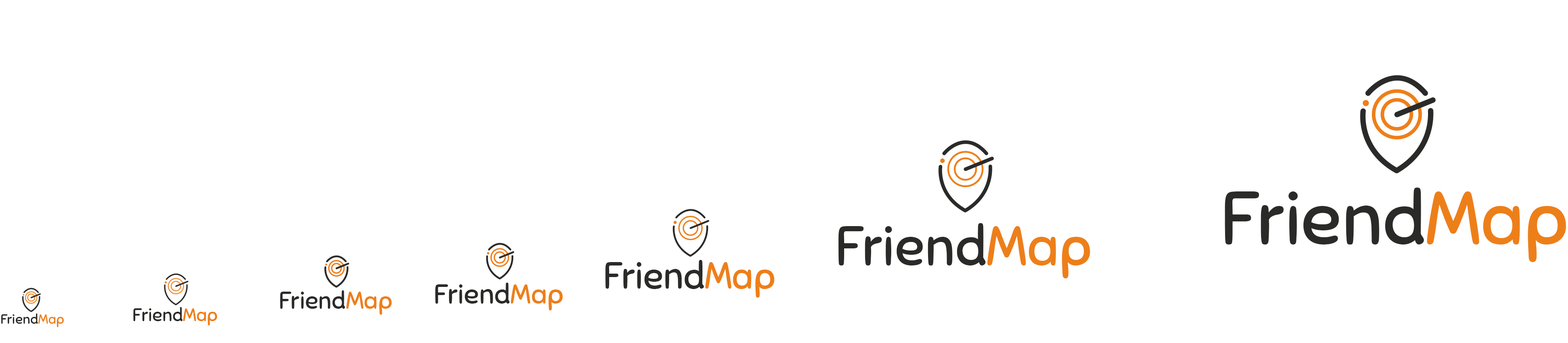
<style>
.page{position:relative;width:1568px;height:343px;background:#ffffff}
.page>*{position:absolute;margin:0}
.t1{font:74.9px "Sniglet-Regular";color:#2a2a29}
.t2{font:74.9px "Sniglet-Regular";color:#ee7f19}
.t3{font:55.3px "Sniglet-Regular";color:#2a2a29}
.t4{font:55.3px "Sniglet-Regular";color:#ee7f19}
.t5{font:37px "Sniglet-Regular";color:#2a2a29}
.t6{font:37px "Sniglet-Regular";color:#ee7f19}
.t7{font:24.6px "Sniglet-Regular";color:#2a2a29}
.t8{font:24.6px "Sniglet-Regular";color:#ee7f19}
.t9{font:28px "Sniglet-Regular";color:#2a2a29}
.t10{font:28px "Sniglet-Regular";color:#ee7f19}
.t11{font:13.8px "Sniglet-Regular";color:#2a2a29}
.t12{font:13.8px "Sniglet-Regular";color:#ee7f19}
.t13{font:18.4px "Sniglet-Regular";color:#2a2a29}
.t14{font:18.4px "Sniglet-Regular";color:#ee7f19}
</style>
<div class="page">
<p class="t1" style="left:1225px;top:187px;width:341px;height:75px">Friend<span class="t2">Map</span></p>
<p class="t3" style="left:838px;top:223px;width:252px;height:55px">Friend<span class="t4">Map</span></p>
<p class="t5" style="left:605px;top:260px;width:169px;height:38px">Friend<span class="t6">Map</span></p>
<p class="t7" style="left:280px;top:290px;width:112px;height:25px">Friend<span class="t8">Map</span></p>
<p class="t9" style="left:435px;top:283px;width:128px;height:27px">Friend<span class="t10">Map</span></p>
<p class="t11" style="left:1px;top:313px;width:63px;height:14px">Friend<span class="t12">Map</span></p>
<p class="t13" style="left:133px;top:307px;width:84px;height:18px">Friend<span class="t14">Map</span></p>
</div>
